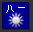
<style>
.page{position:relative;width:33px;height:32px;background:#000090}
.page>*{position:absolute;margin:0}
.t1{font:10.4px "SimSun";color:#ffffff}
</style>
<div class="page">
<p class="t1" style="left:6px;top:5px;width:19px;height:8px">八一</p>
</div>
